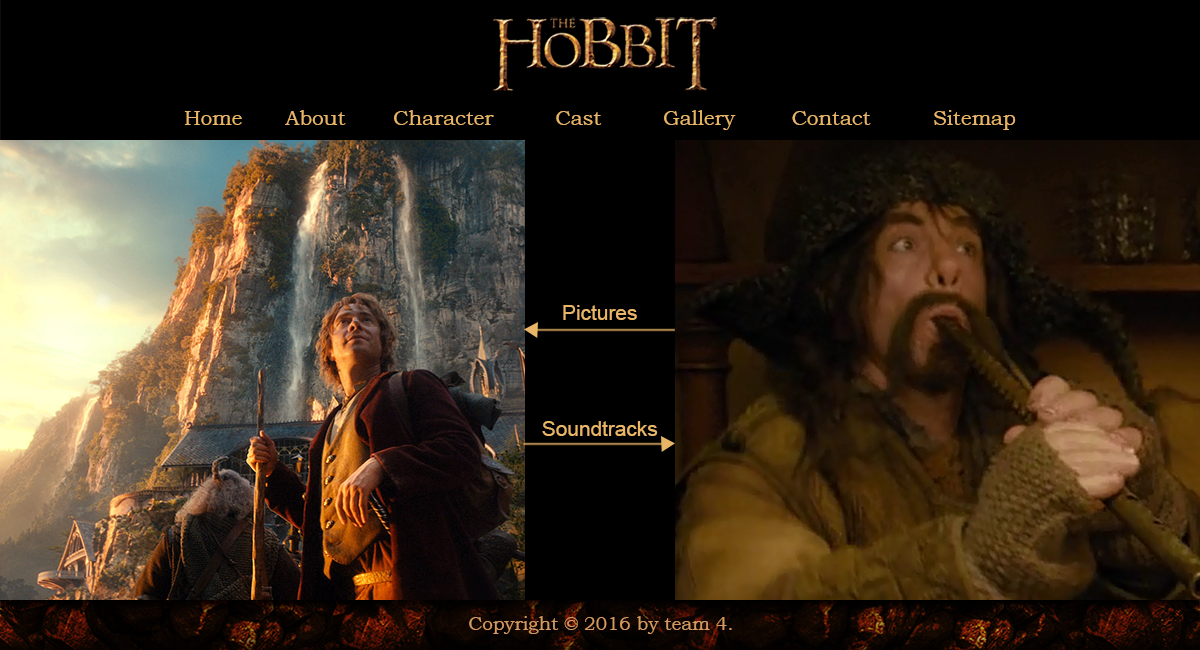
<style>
.page{position:relative;width:1200px;height:650px;background:#000000}
.page>*{position:absolute;margin:0}
.t1{font:20.6px "BookmanOldStyle";color:#e9b566}
.t2{font:20.8px/58.3px "ArialMT";color:#e9b566}
</style>
<div class="page">
<p class="t1" style="left:184px;top:110px;width:832px;height:20px">Home   About   Character   Cast   Gallery   Contact   Sitemap</p>
<p class="t2" style="left:542px;top:305px;width:116px;height:131px;text-align:center">Pictures<br><br>Soundtracks</p>
</div>
